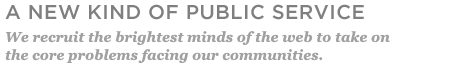
<style>
.page{position:relative;width:469px;height:74px;background:#ffffff}
.page>*{position:absolute;margin:0}
.t1{font:20px "GothamMedium";letter-spacing:0.025em;color:#7f7f7f;text-transform:uppercase}
.t2{font:14px/18px "Georgia-BoldItalic";letter-spacing:0.01em;color:#a0a0a0}
</style>
<div class="page">
<p class="t1" style="left:5px;top:4px;width:359px;height:16px">A New Kind of Public Service</p>
<p class="t2" style="left:5px;top:31px;width:385px;height:32px">We recruit the brightest minds of the web to take on<br>the core problems facing our communities.</p>
</div>
